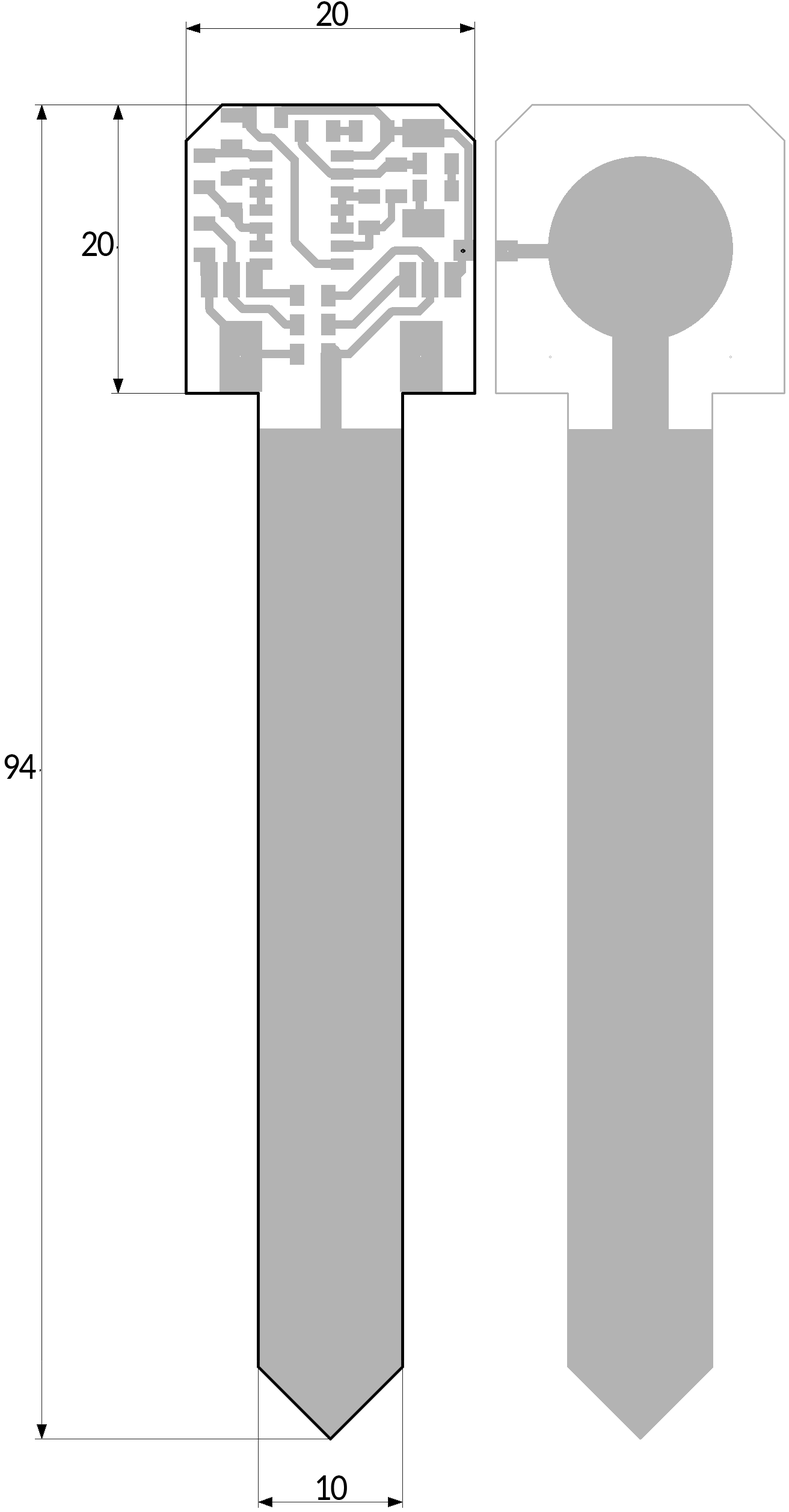
<style>
.page{position:relative;width:789px;height:1512px;background:#ffffff}
.page>*{position:absolute;margin:0}
.t1{font:38.5px "Carlito";letter-spacing:-0.04em;color:#000000;scale:0.9 1}
</style>
<div class="page">
<p class="t1" style="left:316px;top:1px;width:32px;height:25px">20</p>
<p class="t1" style="left:82px;top:231px;width:32px;height:25px">20</p>
<p class="t1" style="left:4px;top:754px;width:32px;height:25px">94</p>
<p class="t1" style="left:317px;top:1476px;width:30px;height:24px">10</p>
</div>
